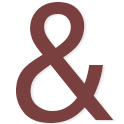
<style>
.page{position:relative;width:124px;height:124px;background:#ffffff}
.page>*{position:absolute;margin:0}
.t1{font:163.2px "Helvetica";letter-spacing:-0.1em;color:#7a3f3f}
</style>
<div class="page">
<p class="t1" style="left:15px;top:2px;width:99px;height:121px">&amp;</p>
</div>
